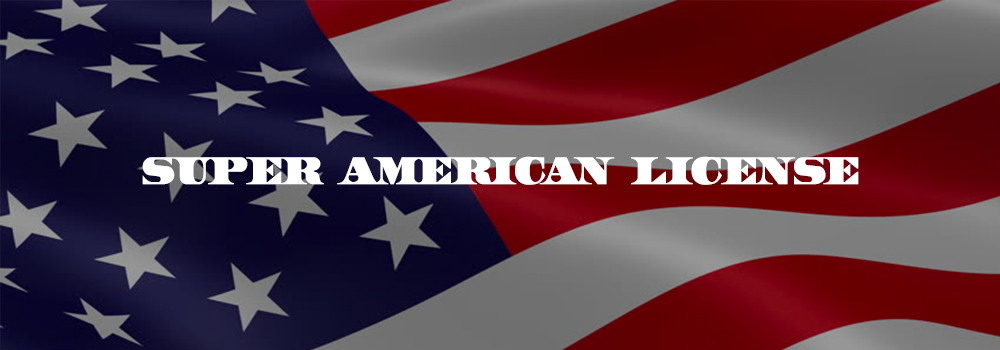
<style>
.page{position:relative;width:1000px;height:350px}
.page>*{position:absolute;margin:0}
.t1{font:36px "UnitedStates";color:#ffffff}
</style>
<div class="page">
<p class="t1" style="left:142px;top:156px;width:717px;height:29px">SUPER  AMERICAN  LICENSE</p>
</div>
